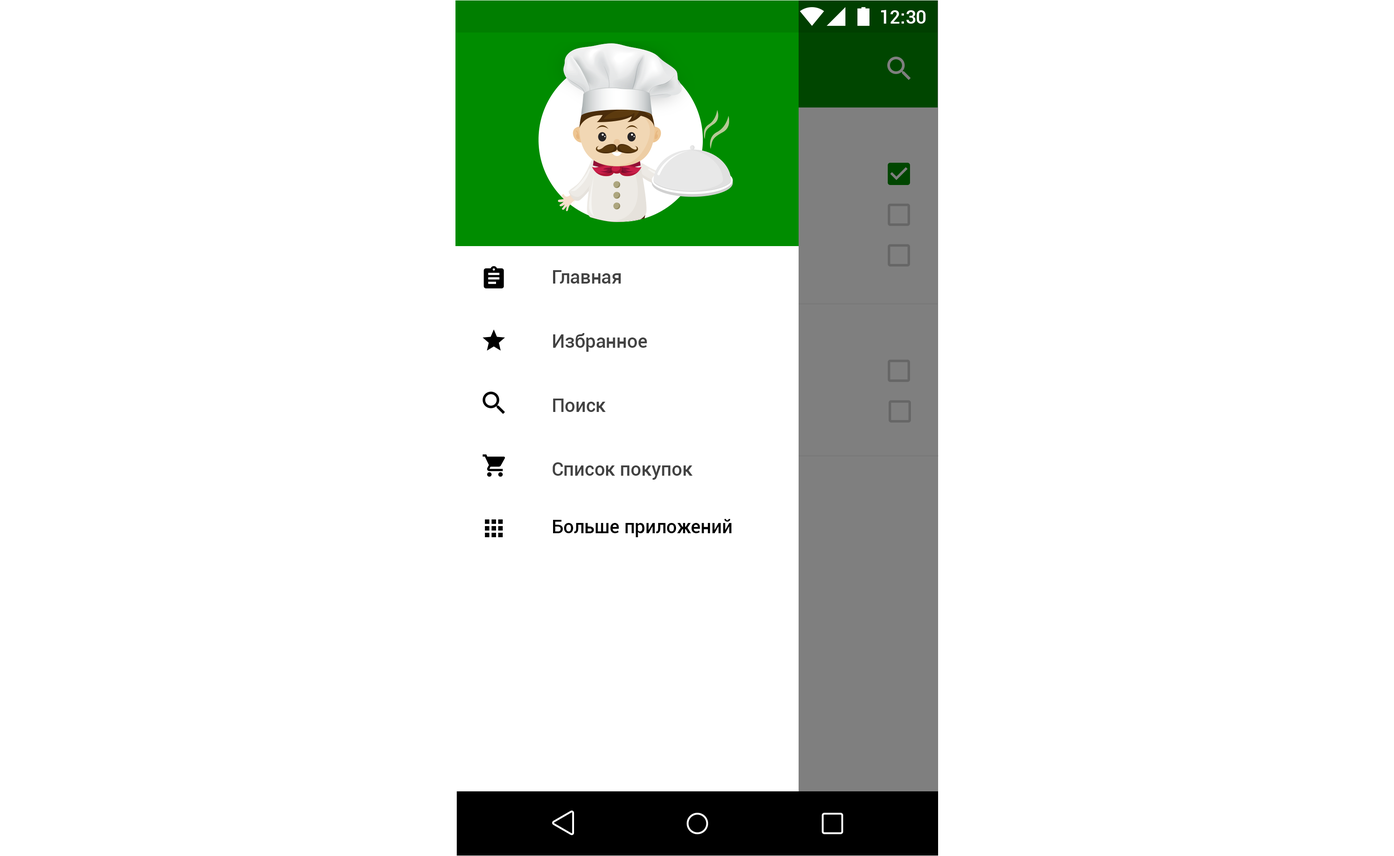
<style>
.page{position:relative;width:1394px;height:856px;background:#ffffff}
.page>*{position:absolute;margin:0}
.t1{font:18.7px "Roboto-Medium";color:#ffffff}
.t2{font:18.7px "Roboto-Medium";color:#424242}
.t3{font:18.7px "Roboto-Medium";color:#000000}
</style>
<div class="page">
<p class="t1" style="left:881px;top:10px;width:44px;height:14px">12:30</p>
<p class="t2" style="left:553px;top:270px;width:68px;height:13px">Главная</p>
<p class="t2" style="left:553px;top:333px;width:94px;height:19px">Избранное</p>
<p class="t2" style="left:553px;top:398px;width:53px;height:14px">Поиск</p>
<p class="t2" style="left:553px;top:462px;width:139px;height:17px">Список покупок</p>
<p class="t3" style="left:553px;top:519px;width:179px;height:18px">Больше приложений</p>
</div>
